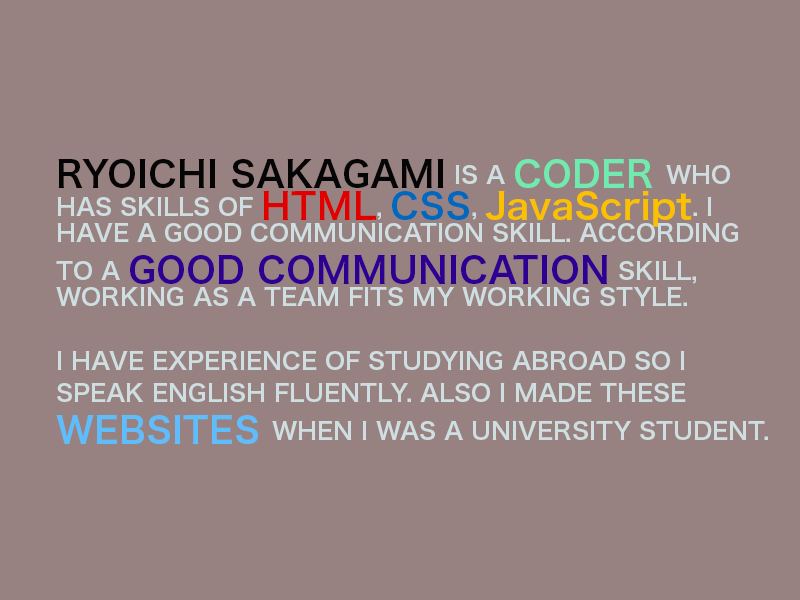
<style>
.page{position:relative;width:800px;height:600px;background:#988181}
.page>*{position:absolute;margin:0}
.t1{font:24px/32px "HiraKakuProN-W6";color:#cfdfe1}
.t2{font:36px/32px "HiraKakuProN-W6";color:#050505}
.t3{font:36px/32px "HiraKakuProN-W6";color:#71eaaf}
.t4{font:36px/32px "HiraKakuProN-W6";color:#e10000}
.t5{font:36px/32px "HiraKakuProN-W6";color:#0069bd}
.t6{font:36px/32px "HiraKakuProN-W6";color:#fbc000}
.t7{font:36px/32px "HiraKakuProN-W6";color:#2e0091}
.t8{font:36px/32px "HiraKakuProN-W6";color:#5ebdfa}
</style>
<div class="page">
<p class="t1" style="left:56px;top:159px;width:712px;height:285px"><span class="t2">RYOICHI SAKAGAMI</span> IS A <span class="t3">CODER </span>WHO HAS SKILLS OF <span class="t4">HTML</span>, <span class="t5">CSS</span>, <span class="t6">JavaScript</span>. I HAVE A GOOD COMMUNICATION SKILL. ACCORDING TO A <span class="t7">GOOD COMMUNICATION</span> SKILL, WORKING AS A TEAM FITS MY WORKING STYLE. <br><br>I HAVE EXPERIENCE OF STUDYING ABROAD SO I SPEAK ENGLISH FLUENTLY. ALSO I MADE THESE <span class="t8">WEBSITES </span>WHEN I WAS A UNIVERSITY STUDENT.</p>
</div>
